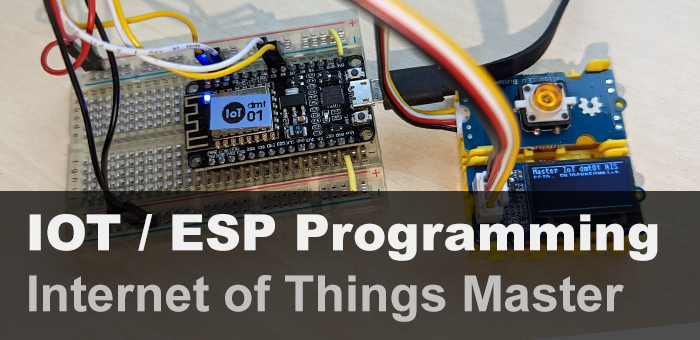
<style>
.page{position:relative;width:700px;height:340px}
.page>*{position:absolute;margin:0}
.t1{font:50px "Arial-Black";color:#ffffff}
.t2{font:50px "Arial-BoldMT";color:#c2c1c0}
</style>
<div class="page">
<p class="t1" style="left:29px;top:214px;width:629px;height:47px">IOT / ESP Programming</p>
<p class="t2" style="left:29px;top:275px;width:595px;height:47px">Internet of Things Master</p>
</div>
